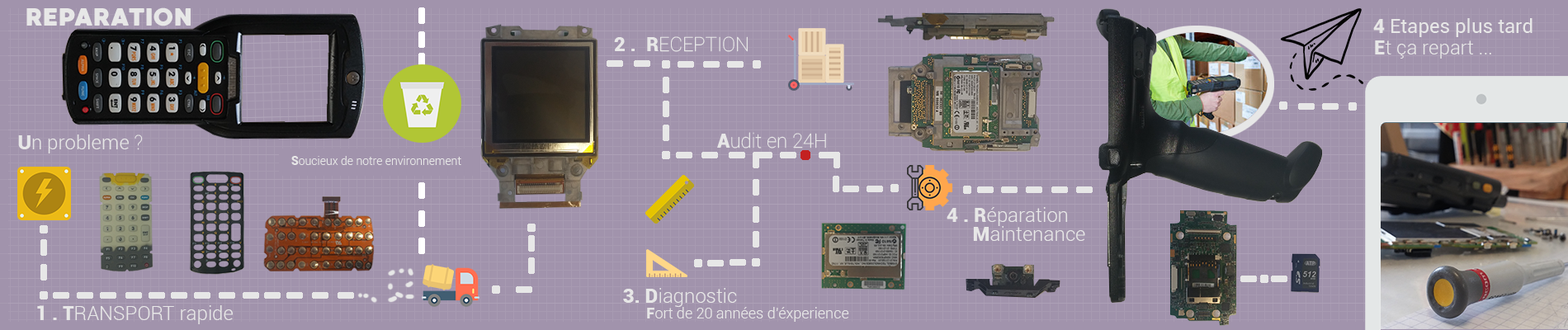
<style>
.page{position:relative;width:1568px;height:330px;background:#a193ac}
.page>*{position:absolute;margin:0}
.t1{font:24.8px "MADEWaffleSoft";color:#e7e7e7}
.t2{font:19.8px "Roboto-Regular";color:#e7e7e7}
.t3{font:19.8px "Roboto-Black";color:#e7e7e7}
.t4{font:19.8px "Roboto-Thin";color:#e7e7e7}
.t5{font:19.8px "Roboto-Light";color:#e7e7e7}
.t6{font:11.6px "Roboto-Light";color:#e7e7e7}
.t7{font:11.6px "Roboto-Black";color:#e7e7e7}
.t8{font:14.9px "Roboto-Light";color:#e7e7e7}
.t9{font:14.9px "Roboto-Black";color:#e7e7e7}
</style>
<div class="page">
<p class="t1" style="left:26px;top:7px;width:165px;height:19px">REPARATION</p>
<p class="t2" style="left:1373px;top:18px;width:160px;height:19px"><span class="t3">4 </span>Etapes plus tard</p>
<p class="t4" style="left:614px;top:36px;width:134px;height:16px"><span class="t3">2 .  R</span>ECEPTION</p>
<p class="t5" style="left:1375px;top:40px;width:116px;height:19px"><span class="t3"> E</span>t ça repart ...</p>
<p class="t5" style="left:18px;top:135px;width:125px;height:18px"><span class="t3">U</span>n probleme<span class="t4"> ?</span></p>
<p class="t4" style="left:717px;top:132px;width:109px;height:17px"><span class="t3">A</span>udit en 24H</p>
<p class="t6" style="left:291px;top:156px;width:170px;height:9px"><span class="t7">S</span>oucieux de notre environnement</p>
<p class="t5" style="left:947px;top:207px;width:121px;height:19px"><span class="t3">4 . R</span>éparation</p>
<p class="t5" style="left:973px;top:226px;width:112px;height:15px"><span class="t3">M</span>aintenance</p>
<p class="t5" style="left:623px;top:288px;width:114px;height:19px"><span class="t3">3. D</span>iagnostic</p>
<p class="t5" style="left:37px;top:305px;width:196px;height:19px"><span class="t3">1 . T</span>RANSPORT rapide</p>
<p class="t8" style="left:647px;top:307px;width:202px;height:15px"><span class="t9">F</span>ort de 20 années d’éxperience</p>
</div>
